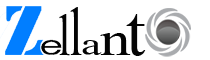
<style>
.page{position:relative;width:210px;height:60px;background:#ffffff}
.page>*{position:absolute;margin:0}
.t1{font:59.2px "TimesNewRomanPSMT";color:#030303;scale:0.76 1}
.t2{font:69.4px "TimesNewRomanPSMT";color:#030303;scale:0.69 1}
.t3{font:69.4px "TimesNewRomanPSMT";color:#050505}
.t4{font:31.4px "TimesNewRomanPSMT";color:#030303;scale:1.45 1}
.t5{font:46.9px "TimesNewRomanPSMT";color:#030303;scale:1.31 1}
</style>
<div class="page">
<p class="t1" style="left:59px;top:14px;width:11px;height:42px;rotate:1deg">l</p>
<p class="t2" style="left:70px;top:7px;width:12px;height:48px">l</p>
<p class="t3" style="left:126px;top:14px;width:20px;height:42px">t</p>
<p class="t4" style="left:82px;top:40px;width:20px;height:15px;rotate:3deg">a</p>
<p class="t5" style="left:100px;top:33px;width:31px;height:22px">n</p>
</div>
